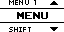
<style>
.page{position:relative;width:64px;height:32px;background:#ffffff}
.page>*{position:absolute;margin:0}
.t1{font:8px "04b03";color:#000000;scale:1.06 1}
.t2{font:14px "ArcadeClassic";color:#000000;scale:1.05 1}
</style>
<div class="page">
<p class="t1" style="left:9px;top:0px;width:27px;height:5px">MENU 1</p>
<p class="t2" style="left:17px;top:12px;width:31px;height:7px">MENU</p>
<p class="t1" style="left:9px;top:27px;width:22px;height:5px">SHIFT</p>
</div>
